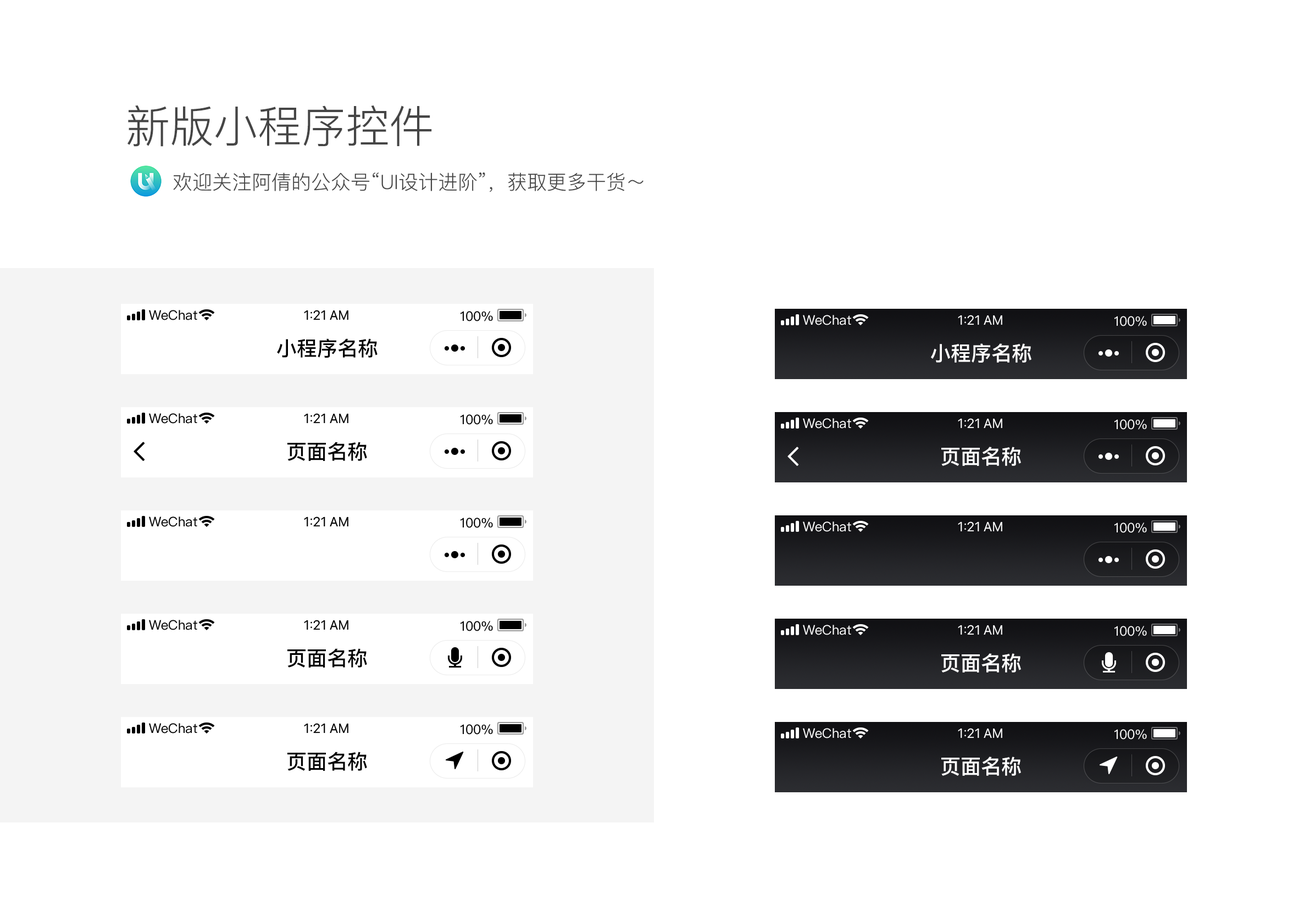
<style>
.page{position:relative;width:1315px;height:906px;background:#ffffff}
.page>*{position:absolute;margin:0}
.t1{font:44px "PingFangSC-Light";color:#454545}
.t2{font:19.8px "PingFangSC-Light";color:#454545}
.t3{font:20.3px "PingFangSC-Medium";color:#000000}
.t4{font:20.3px "PingFangSC-Medium";color:#ffffff}
</style>
<div class="page">
<p class="t1" style="left:128px;top:105px;width:304px;height:42px">新版小程序控件</p>
<p class="t2" style="left:173px;top:172px;width:471px;height:20px">欢迎关注阿倩的公众号“UI设计进阶”，获取更多干货～</p>
<p class="t3" style="left:277px;top:339px;width:101px;height:19px">小程序名称</p>
<p class="t4" style="left:931px;top:344px;width:101px;height:19px">小程序名称</p>
<p class="t3" style="left:287px;top:442px;width:80px;height:19px">页面名称</p>
<p class="t4" style="left:942px;top:447px;width:79px;height:19px">页面名称</p>
<p class="t3" style="left:287px;top:649px;width:80px;height:19px">页面名称</p>
<p class="t4" style="left:942px;top:654px;width:79px;height:19px">页面名称</p>
<p class="t3" style="left:287px;top:752px;width:80px;height:19px">页面名称</p>
<p class="t4" style="left:942px;top:757px;width:79px;height:19px">页面名称</p>
</div>
